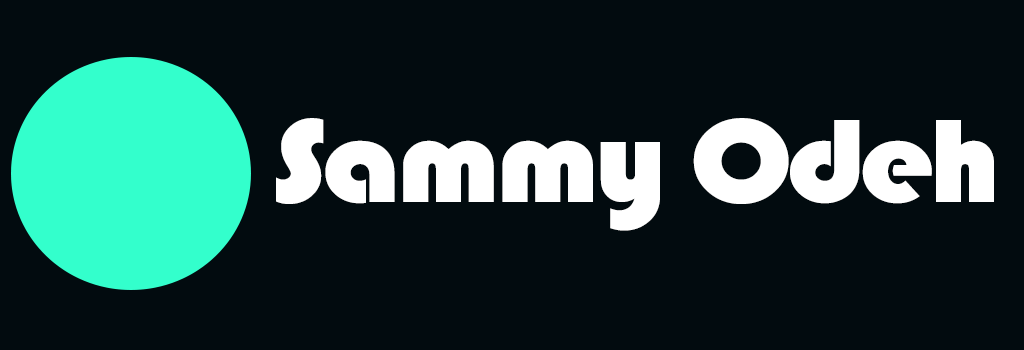
<style>
.page{position:relative;width:1024px;height:350px;background:#020b0f}
.page>*{position:absolute;margin:0}
.t1{font:122.8px "Bauhaus93";letter-spacing:-0.04em;color:#ffffff;scale:1.1 1}
</style>
<div class="page">
<p class="t1" style="left:276px;top:118px;width:718px;height:113px">Sammy Odeh</p>
</div>
